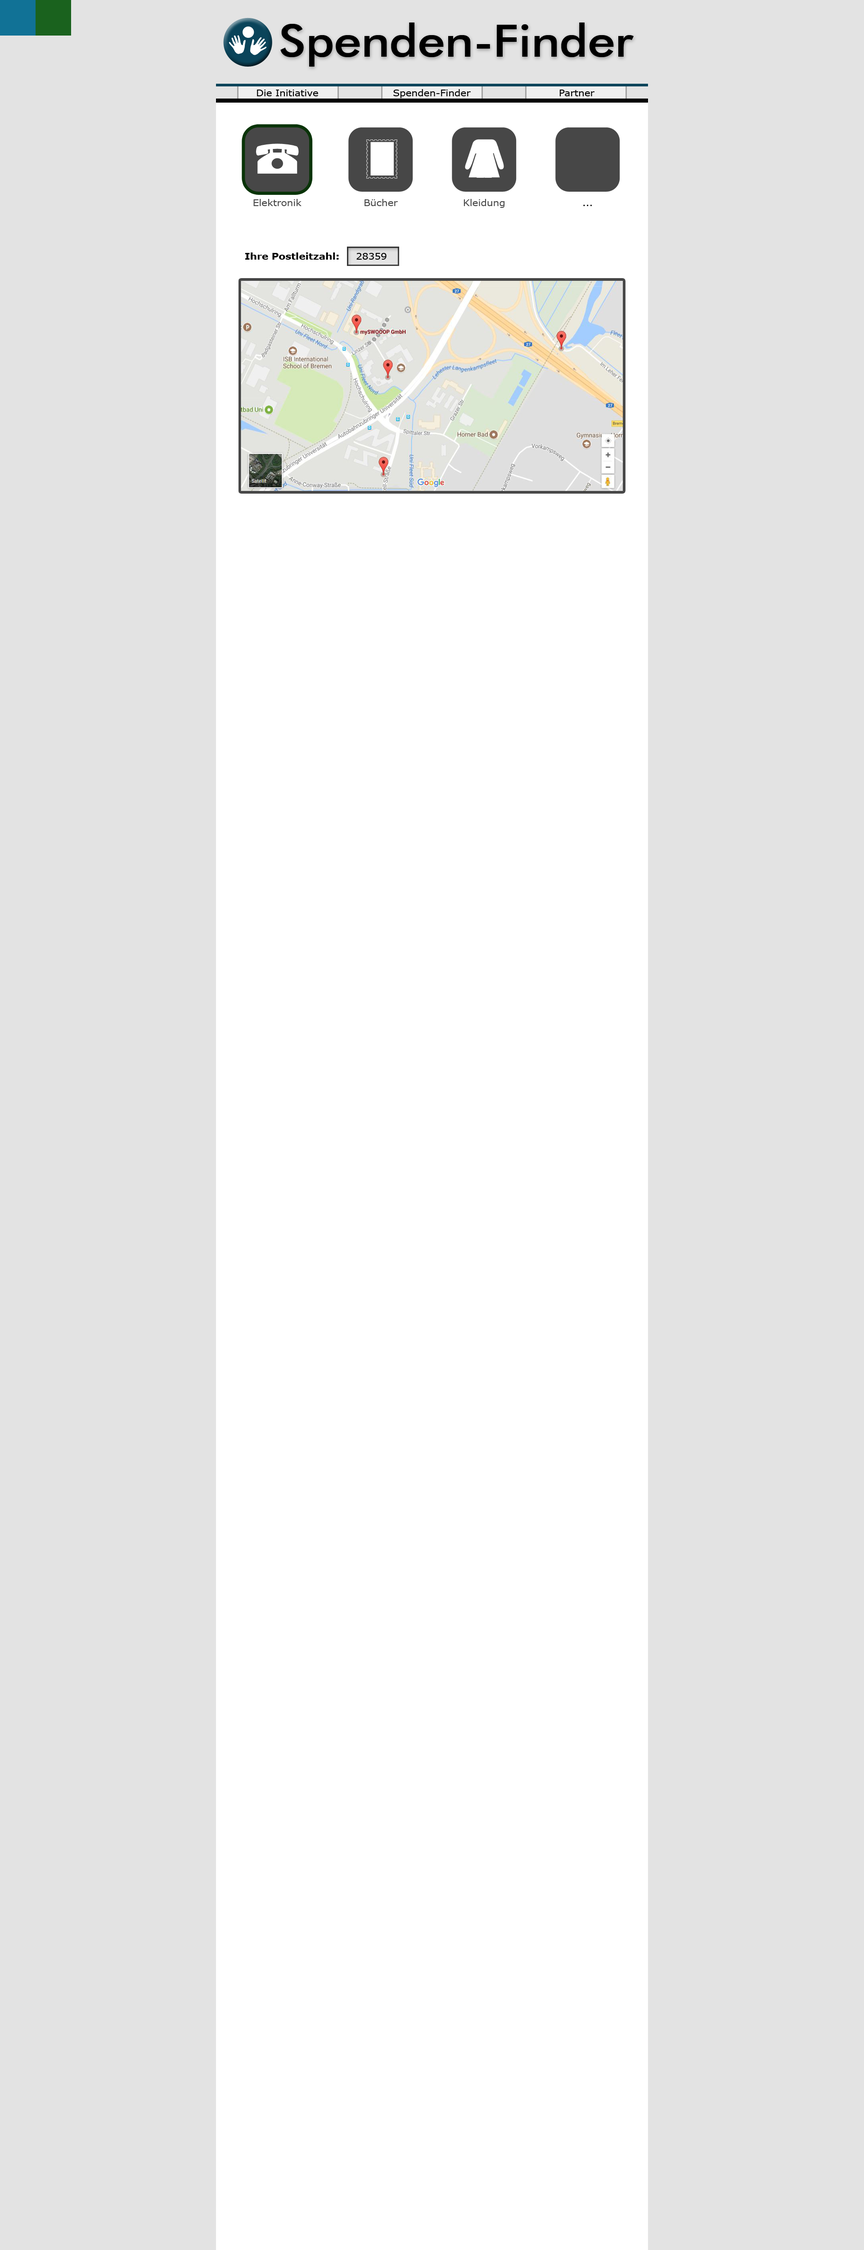
<style>
.page{position:relative;width:864px;height:2250px;background:#e3e3e3}
.page>*{position:absolute;margin:0}
.t1{font:45px "FuturaBT-Medium";letter-spacing:-0.01em;color:#000000;scale:1.1 1}
.t2{font:9px "Verdana";letter-spacing:-0.01em;color:#000000;scale:1.1 1}
.t3{font:9px "Verdana";letter-spacing:-0.01em;color:#474747;scale:1.1 1}
.t4{font:9px "Verdana-Bold";letter-spacing:-0.01em;color:#000000;scale:1.1 1}
</style>
<div class="page">
<p class="t1" style="left:280px;top:22px;width:354px;height:45px">Spenden-Finder</p>
<p class="t2" style="left:257px;top:90px;width:61px;height:6px">Die Initiative</p>
<p class="t2" style="left:393px;top:89px;width:78px;height:9px">Spenden-Finder</p>
<p class="t2" style="left:559px;top:90px;width:36px;height:6px">Partner</p>
<p class="t3" style="left:253px;top:199px;width:49px;height:7px">Elektronik</p>
<p class="t3" style="left:364px;top:199px;width:34px;height:7px">Bücher</p>
<p class="t3" style="left:464px;top:199px;width:41px;height:9px">Kleidung</p>
<p class="t2" style="left:583px;top:205px;width:9px;height:1px">...</p>
<p class="t4" style="left:245px;top:252px;width:142px;height:8px">Ihre Postleitzahl:     <span class="t2">28359</span></p>
</div>
